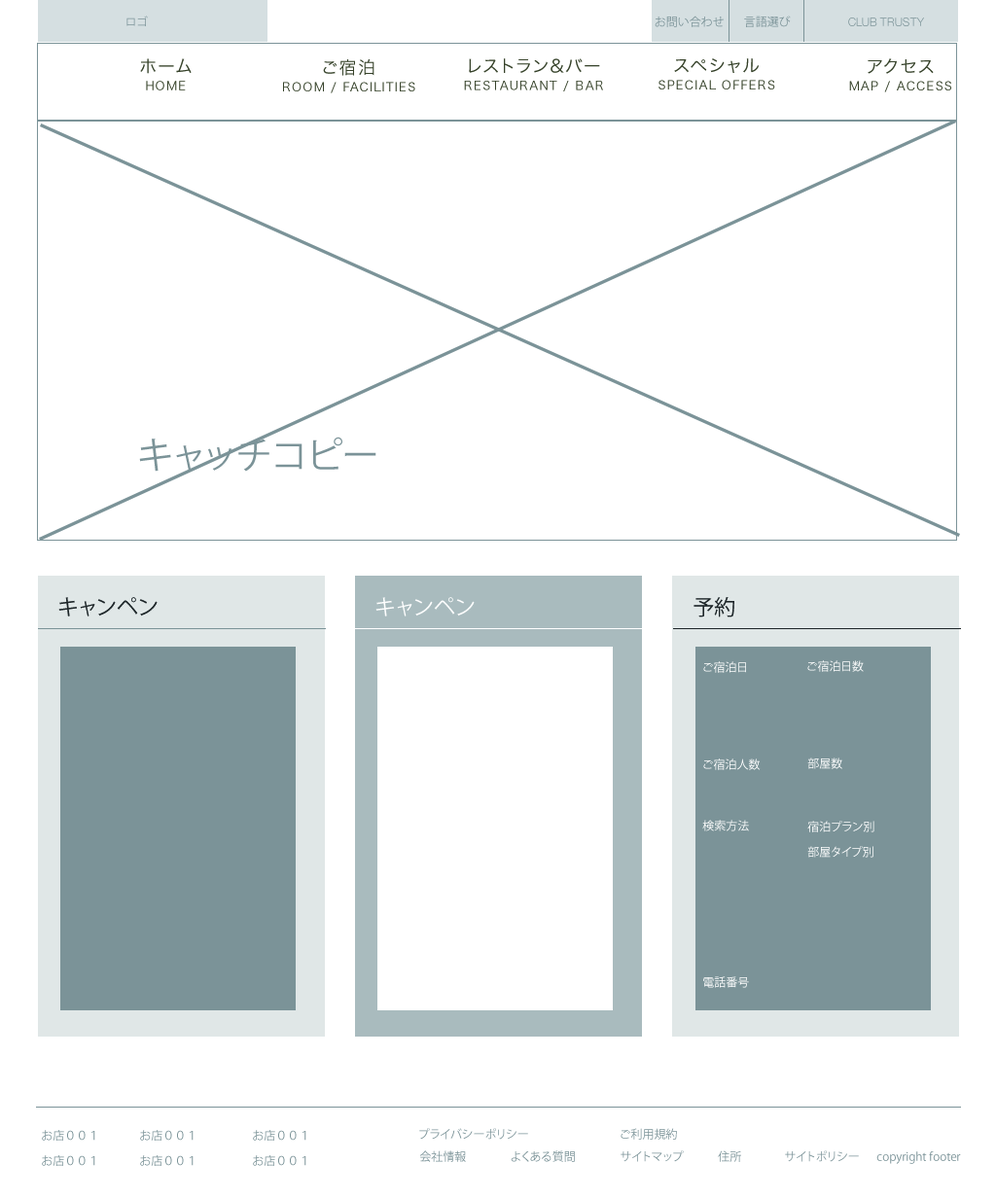
<style>
.page{position:relative;width:996px;height:1198px;background:#ffffff}
.page>*{position:absolute;margin:0}
.t1{font:11.7px "KozGoPr6N-Regular";color:#7b9398}
.t2{font:11.7px "HelveticaNeueLTStd-Lt";color:#7b9398}
.t3{font:36.9px "KozGoPr6N-Regular";color:#7b9398}
.t4{font:21.4px "KozGoPr6N-Regular";color:#1d2528}
.t5{font:21.4px "KozGoPr6N-Regular";color:#ffffff}
.t6{font:11.7px "KozGoPr6N-Regular";color:#ffffff}
</style>
<div class="page">
<p class="t1" style="left:126px;top:16px;width:22px;height:10px">ロゴ</p>
<p class="t1" style="left:654px;top:16px;width:69px;height:11px">お問い合わせ</p>
<p class="t1" style="left:744px;top:16px;width:46px;height:11px">言語選び</p>
<p class="t2" style="left:848px;top:17px;width:76px;height:9px">CLUB TRUSTY</p>
<p class="t3" style="left:139px;top:437px;width:237px;height:35px">キャッチコピー</p>
<p class="t4" style="left:58px;top:597px;width:99px;height:19px">キャンペン</p>
<p class="t5" style="left:375px;top:597px;width:99px;height:19px">キャンペン</p>
<p class="t4" style="left:693px;top:597px;width:41px;height:20px">予約</p>
<p class="t6" style="left:703px;top:661px;width:43px;height:12px">ご宿泊日</p>
<p class="t6" style="left:807px;top:660px;width:56px;height:12px">ご宿泊日数</p>
<p class="t6" style="left:703px;top:758px;width:57px;height:12px">ご宿泊人数</p>
<p class="t6" style="left:807px;top:757px;width:35px;height:12px">部屋数</p>
<p class="t6" style="left:702px;top:820px;width:47px;height:11px">検索方法</p>
<p class="t6" style="left:807px;top:821px;width:67px;height:11px">宿泊プラン別</p>
<p class="t6" style="left:807px;top:846px;width:66px;height:11px">部屋タイプ別</p>
<p class="t6" style="left:703px;top:976px;width:46px;height:12px">電話番号</p>
<p class="t1" style="left:42px;top:1130px;width:53px;height:10px">お店００１</p>
<p class="t1" style="left:140px;top:1130px;width:53px;height:10px">お店００１</p>
<p class="t1" style="left:253px;top:1130px;width:53px;height:10px">お店００１</p>
<p class="t1" style="left:419px;top:1128px;width:109px;height:11px">プライバシーポリシー</p>
<p class="t1" style="left:620px;top:1128px;width:57px;height:11px">ご利用規約</p>
<p class="t1" style="left:42px;top:1155px;width:53px;height:11px">お店００１</p>
<p class="t1" style="left:140px;top:1155px;width:53px;height:11px">お店００１</p>
<p class="t1" style="left:253px;top:1155px;width:53px;height:11px">お店００１</p>
<p class="t1" style="left:419px;top:1150px;width:47px;height:12px">会社情報</p>
<p class="t1" style="left:510px;top:1150px;width:65px;height:12px">よくある質問</p>
<p class="t1" style="left:620px;top:1150px;width:63px;height:12px">サイトマップ</p>
<p class="t1" style="left:717px;top:1150px;width:24px;height:12px">住所</p>
<p class="t1" style="left:785px;top:1150px;width:73px;height:12px">サイトポリシー</p>
<p class="t1" style="left:876px;top:1151px;width:85px;height:13px">copyright footer</p>
</div>
